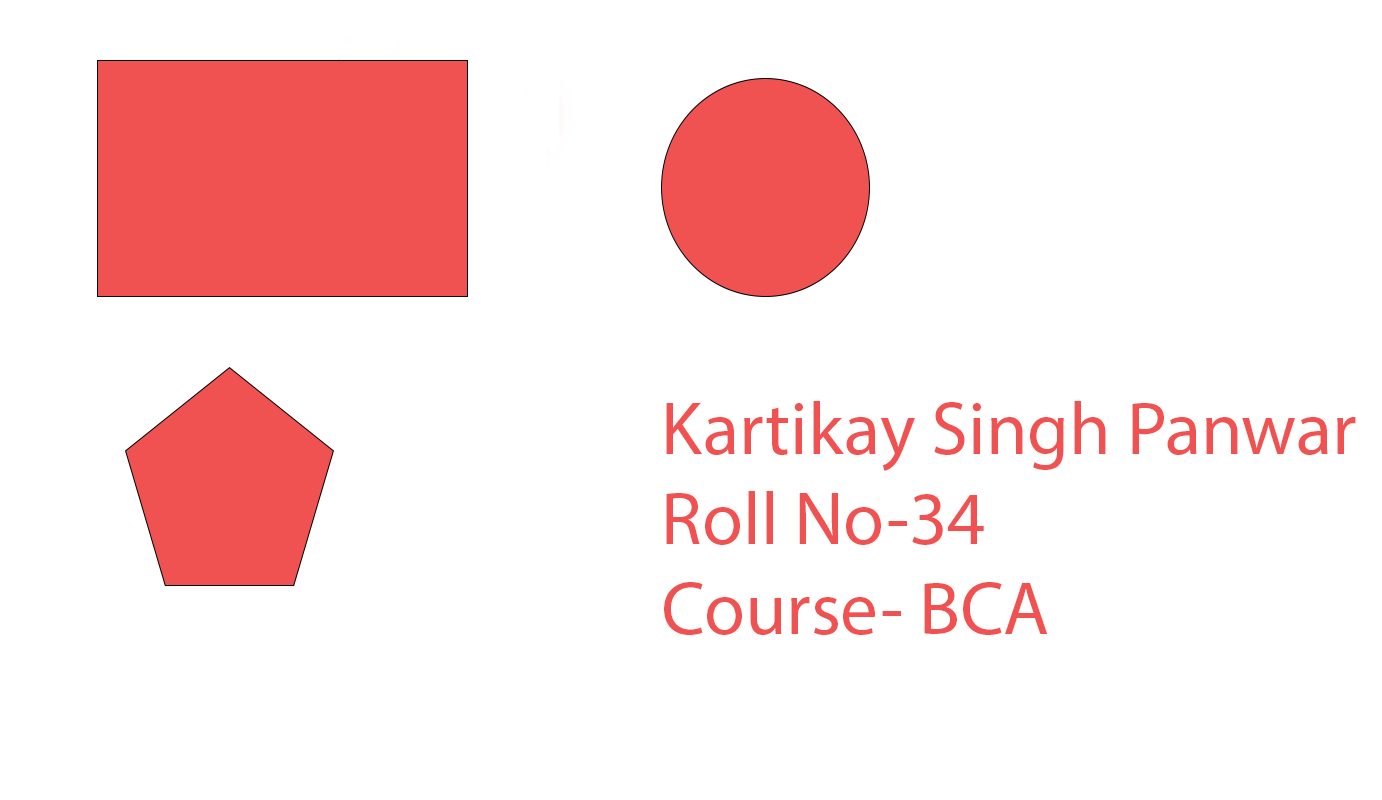
<style>
.page{position:relative;width:1382px;height:800px;background:#ffffff}
.page>*{position:absolute;margin:0}
.t1{font:75px "MyriadPro-Regular";color:#f05151}
</style>
<div class="page">
<p class="t1" style="left:664px;top:401px;width:692px;height:234px">Kartikay Singh Panwar<br>Roll No-34<br>Course- BCA</p>
</div>
